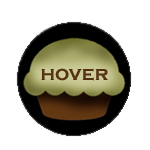
<style>
.page{position:relative;width:150px;height:150px;background:#ffffff}
.page>*{position:absolute;margin:0}
.t1{font:20px "CopperplateGothic-Bold";color:#623812}
</style>
<div class="page">
<p class="t1" style="left:41px;top:68px;width:67px;height:13px">hover</p>
</div>
